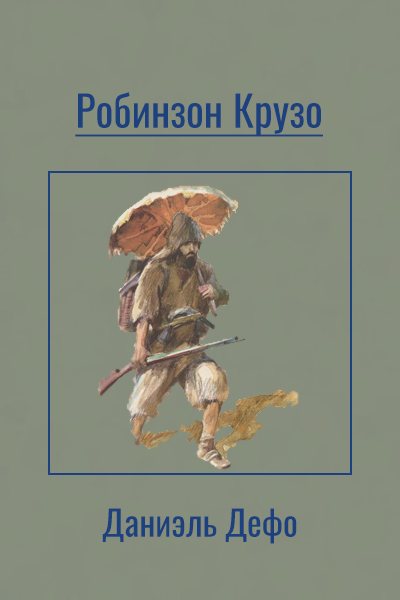
<style>
.page{position:relative;width:400px;height:600px;background:#868e7c}
.page>*{position:absolute;margin:0}
.t1{font:42px "Oswald-Regular";color:#1d417f;text-decoration:underline}
.t2{font:35px "Oswald-Regular";color:#1d417f}
</style>
<div class="page">
<p class="t1" style="left:75px;top:92px;width:248px;height:45px">Робинзон Крузо</p>
<p class="t2" style="left:102px;top:508px;width:195px;height:36px">Даниэль Дефо</p>
</div>
